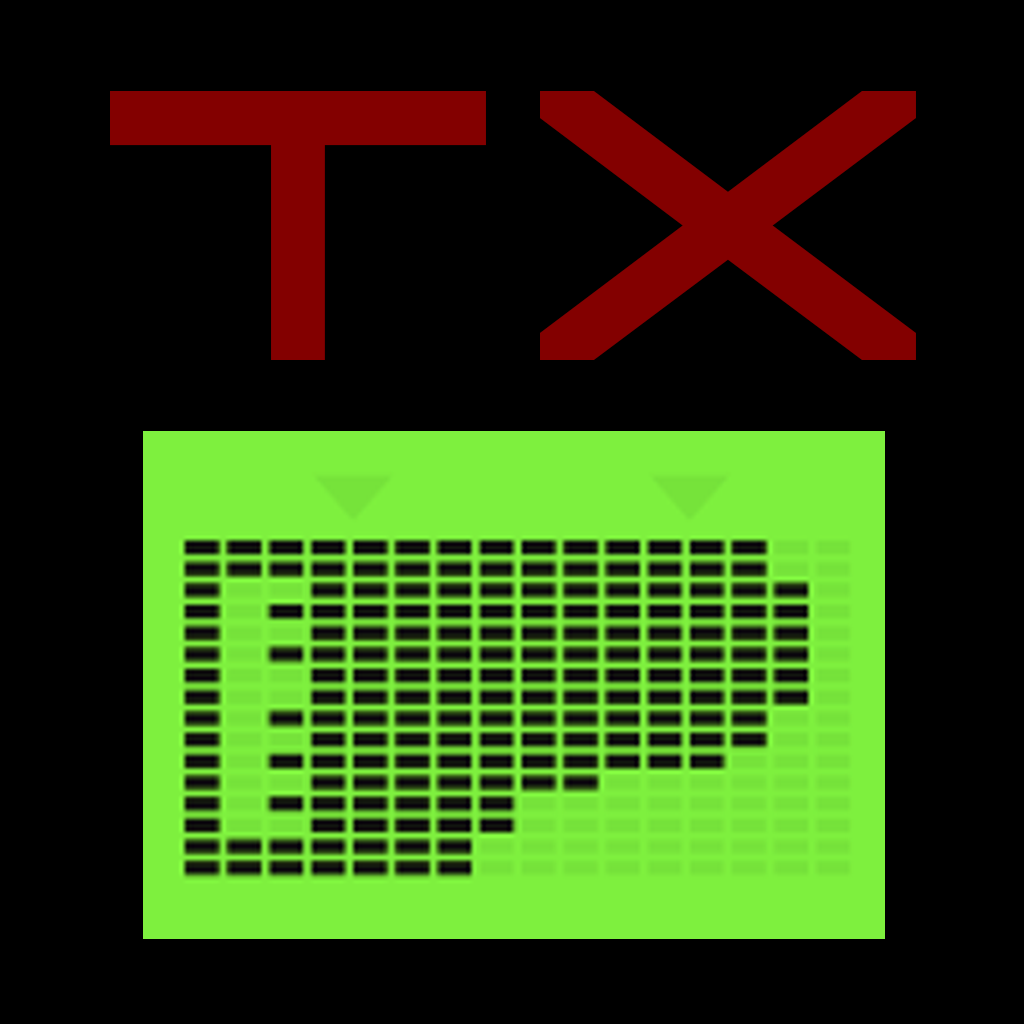
<style>
.page{position:relative;width:1024px;height:1024px;background:#000000}
.page>*{position:absolute;margin:0}
.t1{font:537.4px "SquareSansSerif7";color:#830000}
</style>
<div class="page">
<p class="t1" style="left:110px;top:91px;width:806px;height:269px">TX</p>
</div>
